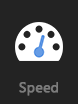
<style>
.page{position:relative;width:78px;height:104px;background:#232323}
.page>*{position:absolute;margin:0}
.t1{font:14px "SegoeUI";color:#7c7c7c;font-weight:bold}
</style>
<div class="page">
<p class="t1" style="left:19px;top:82px;width:39px;height:14px">Speed</p>
</div>
